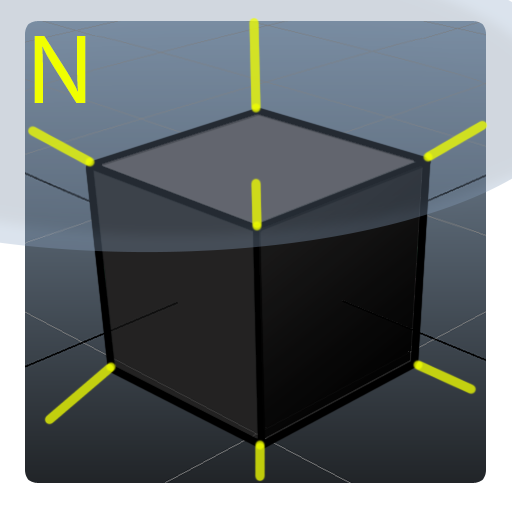
<style>
.page{position:relative;width:512px;height:512px}
.page>*{position:absolute;margin:0}
.t1{font:100px "MyriadPro-Regular";color:#f0ff00}
</style>
<div class="page">
<p class="t1" style="left:34px;top:36px;width:52px;height:67px">N</p>
</div>
